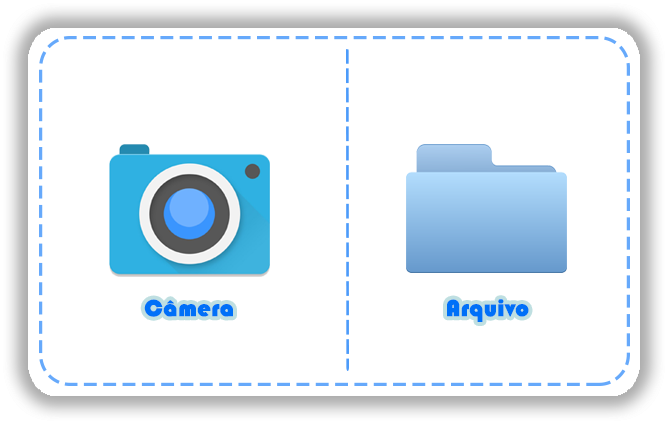
<style>
.page{position:relative;width:669px;height:425px;background:#ffffff}
.page>*{position:absolute;margin:0}
.t1{font:24px "Blippo-Heavy";color:#0070f8;font-weight:bold}
</style>
<div class="page">
<p class="t1" style="left:144px;top:299px;width:89px;height:18px">Câmera</p>
<p class="t1" style="left:447px;top:299px;width:82px;height:23px">Arquivo</p>
</div>
